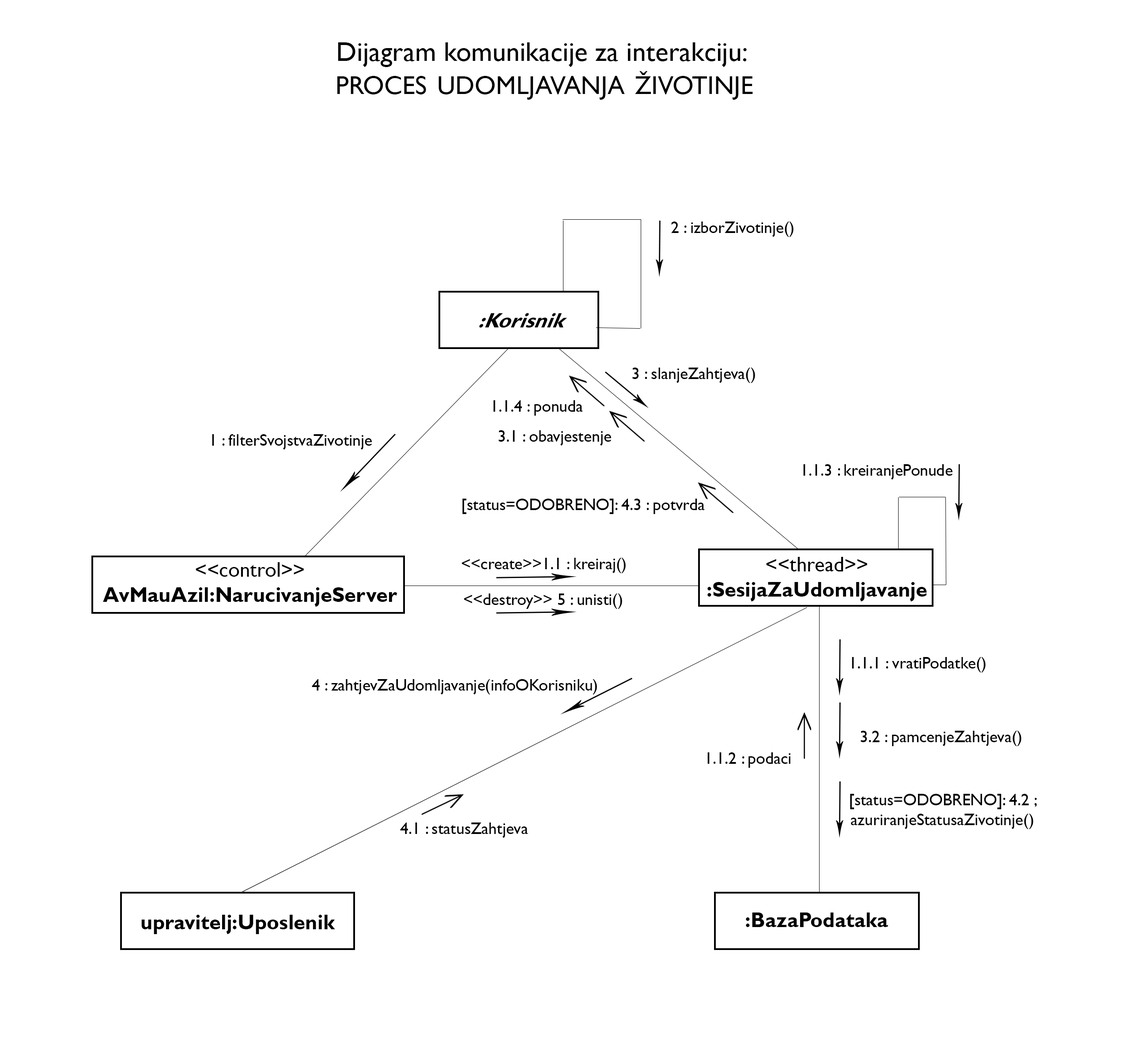
<style>
.page{position:relative;width:1126px;height:1059px;background:#ffffff}
.page>*{position:absolute;margin:0}
.t1{font:27.5px/33.1px "GillSansMT";color:#000000}
.t2{font:36.8px/33.1px "GillSansMT";color:#000000;font-variant:small-caps}
.t3{font:16.6px "GillSansMT";color:#000000}
.t4{font:22.5px "GillSansMT-Bold";color:#000000;scale:0.92 1}
.t5{font:20.8px "GillSansMT-Bold";color:#000000}
.t6{font:20.8px "GillSansMT";color:#000000}
</style>
<div class="page">
<p class="t1" style="left:337px;top:42px;width:416px;height:58px;text-align:center">Dijagram komunikacije za interakciju:<br> <span class="t2">proces udomljavanja životinje</span></p>
<p class="t3" style="left:671px;top:222px;width:122px;height:15px">2 : izborZivotinje()</p>
<p class="t4" style="left:479px;top:313px;width:88px;height:15px">:Korisnik</p>
<p class="t3" style="left:632px;top:368px;width:123px;height:15px">3 : slanjeZahtjeva()</p>
<p class="t3" style="left:493px;top:400px;width:90px;height:16px">1.1.4 : ponuda</p>
<p class="t3" style="left:212px;top:434px;width:160px;height:16px">1 : filterSvojstvaZivotinje</p>
<p class="t3" style="left:498px;top:430px;width:113px;height:16px">3.1 : obavjestenje</p>
<p class="t3" style="left:803px;top:464px;width:149px;height:16px">1.1.3 : kreiranjePonude</p>
<p class="t3" style="left:462px;top:499px;width:242px;height:15px">[status=ODOBRENO]: 4.3 : potvrda</p>
<p class="t3" style="left:462px;top:558px;width:163px;height:15px">&lt;&lt;create&gt;&gt;1.1 : kreiraj()</p>
<p class="t5" style="left:707px;top:557px;width:220px;height:45px;text-align:center"><span class="t6">&lt;&lt;thread&gt;&gt;<br></span>:SesijaZaUdomljavanje</p>
<p class="t5" style="left:103px;top:562px;width:294px;height:45px;text-align:center"><span class="t6">&lt;&lt;control&gt;&gt;<br></span>AvMauAzil:NarucivanjeServer</p>
<p class="t3" style="left:464px;top:594px;width:158px;height:15px">&lt;&lt;destroy&gt;&gt; 5 : unisti()</p>
<p class="t3" style="left:851px;top:657px;width:134px;height:16px">1.1.1 : vratiPodatke()</p>
<p class="t3" style="left:312px;top:679px;width:285px;height:16px">4 : zahtjevZaUdomljavanje(infoOKorisniku)</p>
<p class="t3" style="left:860px;top:731px;width:161px;height:15px">3.2 : pamcenjeZahtjeva()</p>
<p class="t3" style="left:707px;top:753px;width:84px;height:15px">1.1.2 : podaci</p>
<p class="t3" style="left:850px;top:794px;width:186px;height:35px;text-align:center">[status=ODOBRENO]: 4.2 ;<br>azuriranjeStatusaZivotinje()</p>
<p class="t3" style="left:400px;top:823px;width:128px;height:15px">4.1 : statusZahtjeva</p>
<p class="t5" style="left:141px;top:915px;width:194px;height:19px">upravitelj:Uposlenik</p>
<p class="t5" style="left:746px;top:913px;width:142px;height:14px">:BazaPodataka</p>
</div>
